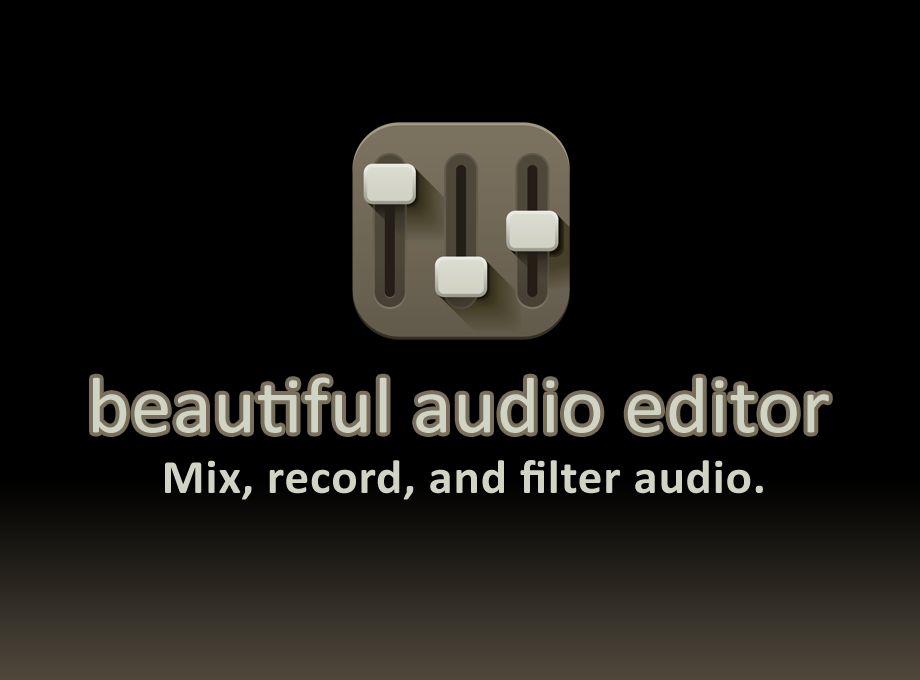
<style>
.page{position:relative;width:920px;height:680px;background:#000000}
.page>*{position:absolute;margin:0}
.t1{font:80.2px "Calibri";letter-spacing:0.01em;color:#d1d3c4}
.t2{font:48px "Calibri-Bold";letter-spacing:0.015em;color:#d1d3c4}
</style>
<div class="page">
<p class="t1" style="left:93px;top:377px;width:736px;height:56px">beautiful audio editor</p>
<p class="t2" style="left:165px;top:460px;width:598px;height:40px">Mix, record, and filter audio.</p>
</div>
